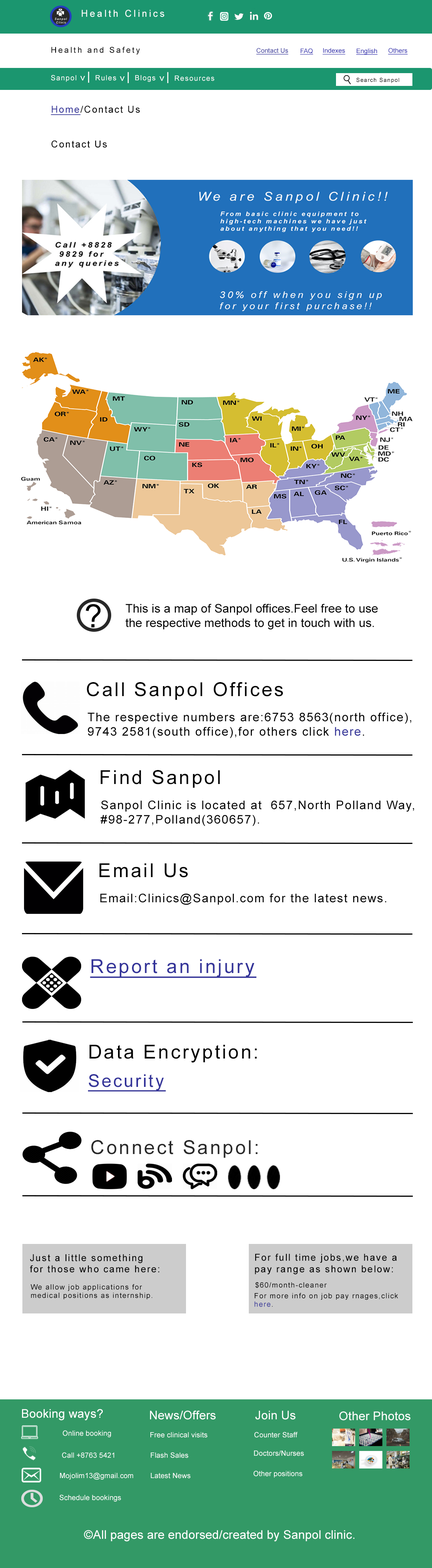
<style>
.page{position:relative;width:432px;height:1568px;background:#ffffff}
.page>*{position:absolute;margin:0}
.t1{font:3px "Arial-ItalicMT";letter-spacing:0.2em;scale:0.97 1}
.t2{font:9.6px "ArialMT";letter-spacing:0.2em;color:#ffffff}
.t3{font:8px "ArialMT";letter-spacing:0.2em;color:#000000}
.t4{font:6.4px "ArialMT";letter-spacing:0.005em;color:#333399;text-decoration:underline}
.t5{font:6.4px "ArialMT";letter-spacing:0.005em;color:#312eae;text-decoration:underline}
.t6{font:7.2px "ArialMT";letter-spacing:0.1em;color:#ffffff}
.t7{font:9.6px "Arial-ItalicMT";letter-spacing:0.2em;color:#ffffff}
.t8{font:12px "Arial-ItalicMT";letter-spacing:0.2em;color:#ffffff}
.t9{font:5.6px "ArialMT";letter-spacing:0.1em;color:#000000}
.t10{font:9.6px "ArialMT";letter-spacing:0.1em;color:#000000}
.t11{font:9.6px "ArialMT";letter-spacing:0.1em;color:#333399;text-decoration:underline}
.t12{font:32px "ArialMT";letter-spacing:0.005em;color:#000000}
.t13{font:12px "ArialMT";letter-spacing:0.005em;color:#000000}
.t14{font:19.2px "ArialMT";letter-spacing:0.1em;color:#000000}
.t15{font:12px "ArialMT";letter-spacing:0.075em;color:#000000}
.t16{font:12px "ArialMT";letter-spacing:0.075em;color:#333399}
.t17{font:19.2px "ArialMT";letter-spacing:0.1em;color:#333399;text-decoration:underline}
.t18{font:17.6px "ArialMT";letter-spacing:0.1em;color:#333399;text-decoration:underline}
.t19{font:19.2px "ArialMT";letter-spacing:0.1em;color:#282828}
.t20{font:7.2px "ArialMT";letter-spacing:0.1em;color:#000000}
.t21{font:7.2px "ArialMT";letter-spacing:0.1em;color:#333399}
.t22{font:12px "ArialMT";letter-spacing:0.01em;color:#ffffff}
.t23{font:7.2px "ArialMT";letter-spacing:0.01em;color:#ffffff}
</style>
<div class="page">
<p class="t1" style="left:55px;top:18px;width:12px;height:6px">Sanpol<br> Clinic</p>
<p class="t2" style="left:82px;top:10px;width:82px;height:7px">Health Clinics</p>
<p class="t3" style="left:51px;top:47px;width:89px;height:8px">Health and Safety</p>
<p class="t4" style="left:256px;top:48px;width:32px;height:7px">Contact Us</p>
<p class="t5" style="left:300px;top:48px;width:13px;height:7px">FAQ</p>
<p class="t5" style="left:322px;top:48px;width:23px;height:7px">Indexes</p>
<p class="t5" style="left:356px;top:48px;width:21px;height:7px">English</p>
<p class="t5" style="left:388px;top:48px;width:19px;height:7px">Others</p>
<p class="t6" style="left:51px;top:75px;width:25px;height:7px">Sanpol</p>
<p class="t7" style="left:80px;top:76px;width:5px;height:5px;rotate:90deg">&gt;</p>
<p class="t8" style="left:88px;top:72px;width:1px;height:11px">|</p>
<p class="t6" style="left:96px;top:75px;width:20px;height:6px">Rules</p>
<p class="t7" style="left:119px;top:76px;width:6px;height:5px;rotate:90deg">&gt;</p>
<p class="t8" style="left:127px;top:72px;width:2px;height:11px">|</p>
<p class="t6" style="left:135px;top:75px;width:20px;height:7px">Blogs</p>
<p class="t7" style="left:159px;top:76px;width:5px;height:5px;rotate:90deg">&gt;</p>
<p class="t8" style="left:167px;top:72px;width:1px;height:11px">|</p>
<p class="t6" style="left:175px;top:76px;width:39px;height:5px">Resources</p>
<p class="t9" style="left:356px;top:78px;width:43px;height:5px">Search Sanpol</p>
<p class="t10" style="left:51px;top:105px;width:89px;height:10px"><span class="t11">Home</span>/Contact Us</p>
<p class="t10" style="left:51px;top:140px;width:56px;height:8px">Contact Us</p>
<p class="t12" style="left:86px;top:604px;width:15px;height:23px">?</p>
<p class="t13" style="left:125px;top:604px;width:253px;height:26px">This is a map of Sanpol offices.Feel free to use <br>the respective methods to get in touch with us.</p>
<p class="t14" style="left:87px;top:682px;width:196px;height:18px">Call Sanpol Offices</p>
<p class="t15" style="left:88px;top:712px;width:323px;height:26px">The respective numbers are:6753 8563(north office),<br>9743 2581(south office),for others click <span class="t16">here</span>.</p>
<p class="t14" style="left:100px;top:770px;width:120px;height:18px">Find Sanpol</p>
<p class="t15" style="left:100px;top:800px;width:314px;height:26px">Sanpol Clinic is located at  657,North Polland Way,<br>#98-277,Polland(360657).</p>
<p class="t14" style="left:99px;top:863px;width:89px;height:15px">Email Us</p>
<p class="t15" style="left:100px;top:893px;width:286px;height:12px">Email:Clinics@Sanpol.com for the latest news.</p>
<p class="t17" style="left:90px;top:959px;width:166px;height:19px">Report an injury</p>
<p class="t14" style="left:89px;top:1045px;width:168px;height:18px">Data Encryption:</p>
<p class="t18" style="left:88px;top:1074px;width:78px;height:18px">Security</p>
<p class="t19" style="left:91px;top:1140px;width:166px;height:18px">Connect Sanpol:</p>
<p class="t10" style="left:30px;top:1254px;width:129px;height:19px">Just a little something<br>for those who came here:</p>
<p class="t10" style="left:255px;top:1254px;width:141px;height:20px">For full time jobs,we have a <br>pay range as shown below:</p>
<p class="t20" style="left:30px;top:1284px;width:122px;height:15px">We allow job applications for <br>medical positions as internship.</p>
<p class="t20" style="left:255px;top:1282px;width:71px;height:6px">$60/month-cleaner</p>
<p class="t20" style="left:254px;top:1293px;width:144px;height:14px">For more info on job pay rnages,click<br><span class="t21">here</span>.</p>
<p class="t22" style="left:22px;top:1409px;width:81px;height:12px">Booking ways?</p>
<p class="t22" style="left:150px;top:1411px;width:65px;height:9px">News/Offers</p>
<p class="t22" style="left:255px;top:1411px;width:40px;height:9px">Join Us</p>
<p class="t22" style="left:339px;top:1411px;width:71px;height:10px">Other Photos</p>
<p class="t23" style="left:63px;top:1430px;width:48px;height:7px">Online booking</p>
<p class="t23" style="left:150px;top:1432px;width:57px;height:6px">Free clinical visits</p>
<p class="t23" style="left:254px;top:1432px;width:43px;height:6px">Counter Staff</p>
<p class="t23" style="left:62px;top:1452px;width:52px;height:6px">Call +8763 5421</p>
<p class="t23" style="left:151px;top:1452px;width:37px;height:6px">Flash Sales</p>
<p class="t23" style="left:254px;top:1451px;width:50px;height:5px">Doctors/Nurses</p>
<p class="t23" style="left:60px;top:1472px;width:73px;height:8px">Mojolim13@gmail.com</p>
<p class="t23" style="left:151px;top:1473px;width:39px;height:5px">Latest News</p>
<p class="t23" style="left:253px;top:1470px;width:49px;height:8px">Other positions</p>
<p class="t23" style="left:60px;top:1494px;width:61px;height:8px">Schedule bookings</p>
<p class="t22" style="left:84px;top:1530px;width:270px;height:12px">©All pages are endorsed/created by Sanpol clinic.</p>
</div>
